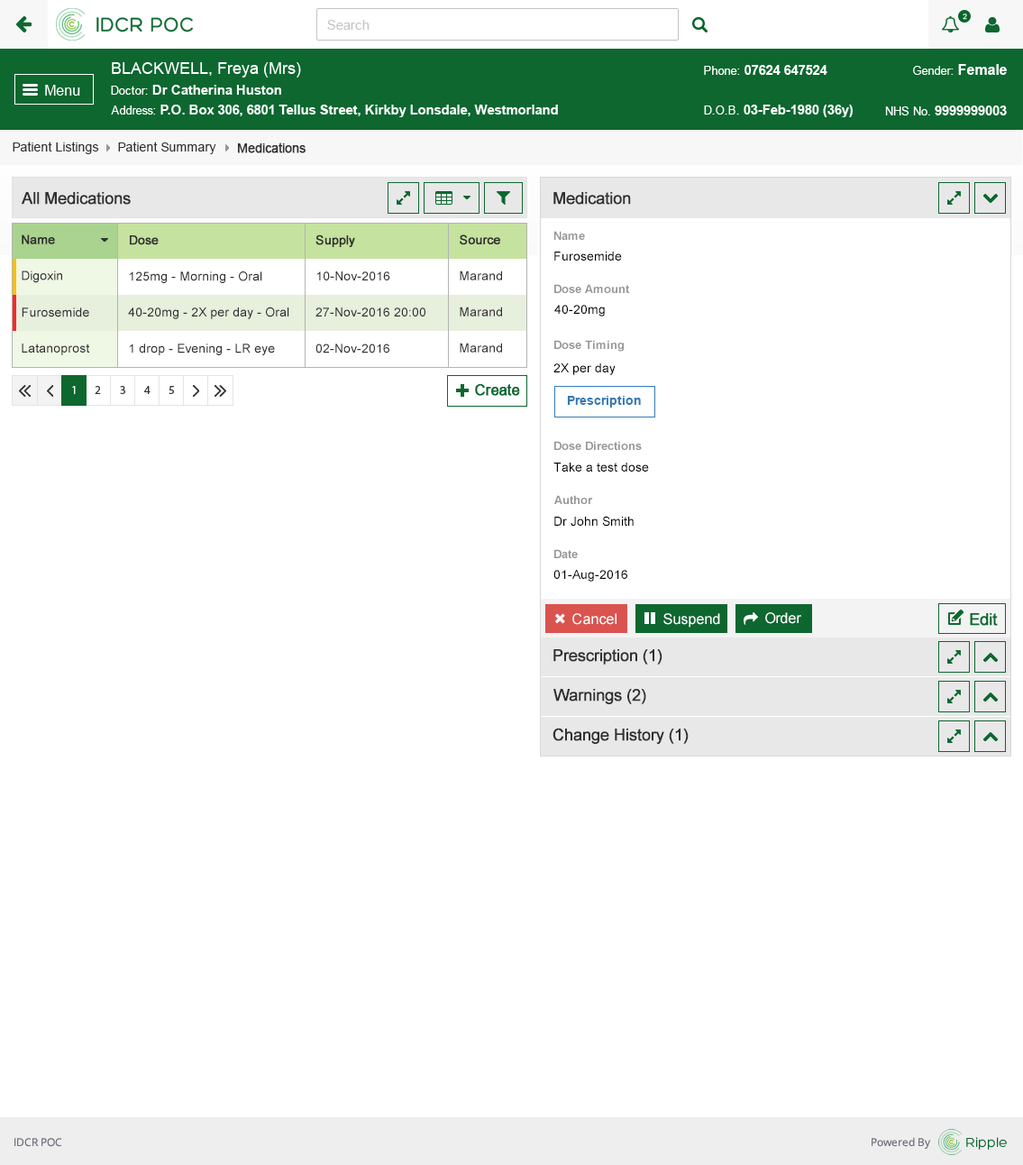
<style>
.page{position:relative;width:1023px;height:1165px;background:#ffffff}
.page>*{position:absolute;margin:0}
.t1{font:12.6px "ArialMT";color:#313131}
.t2{font:12.6px "ArialMT";color:#313131;font-weight:bold}
.t3{font:16.2px "ArialMT";color:#303030;font-weight:bold}
.t4{font:11.7px "Arial-BoldMT";color:#959595}
.t5{font:12.6px "ArialMT";color:#303030;font-weight:bold}
.t6{font:12.6px "ArialMT";color:#000000}
.t7{font:12.6px "ArialMT";color:#303030}
.t8{font:12.6px "Arial-BoldMT";color:#337ab7}
.t9{font:14.4px "ArialMT";color:#ffffff}
</style>
<div class="page">
<p class="t1" style="left:13px;top:142px;width:86px;height:12px">Patient Listings</p>
<p class="t1" style="left:118px;top:142px;width:98px;height:12px">Patient Summary</p>
<p class="t2" style="left:237px;top:142px;width:69px;height:11px">Medications</p>
<p class="t3" style="left:22px;top:192px;width:109px;height:13px">All Medications</p>
<p class="t3" style="left:554px;top:192px;width:77px;height:13px">Medication</p>
<p class="t4" style="left:555px;top:231px;width:30px;height:9px">Name</p>
<p class="t5" style="left:22px;top:234px;width:33px;height:10px">Name</p>
<p class="t5" style="left:130px;top:235px;width:29px;height:10px">Dose</p>
<p class="t5" style="left:316px;top:234px;width:39px;height:13px">Supply</p>
<p class="t5" style="left:460px;top:234px;width:40px;height:11px">Source</p>
<p class="t6" style="left:555px;top:252px;width:67px;height:9px">Furosemide</p>
<p class="t7" style="left:22px;top:271px;width:40px;height:12px">Digoxin</p>
<p class="t7" style="left:129px;top:271px;width:133px;height:12px">125mg - Morning - Oral</p>
<p class="t7" style="left:317px;top:271px;width:73px;height:9px">10-Nov-2016</p>
<p class="t7" style="left:460px;top:271px;width:42px;height:9px">Marand</p>
<p class="t4" style="left:555px;top:284px;width:75px;height:9px">Dose Amount</p>
<p class="t6" style="left:555px;top:305px;width:50px;height:12px">40-20mg</p>
<p class="t7" style="left:22px;top:307px;width:67px;height:10px">Furosemide</p>
<p class="t7" style="left:128px;top:307px;width:161px;height:12px">40-20mg - 2X per day - Oral</p>
<p class="t7" style="left:316px;top:307px;width:110px;height:10px">27-Nov-2016 20:00</p>
<p class="t7" style="left:460px;top:307px;width:42px;height:10px">Marand</p>
<p class="t4" style="left:555px;top:340px;width:69px;height:12px">Dose Timing</p>
<p class="t7" style="left:22px;top:344px;width:68px;height:11px">Latanoprost</p>
<p class="t7" style="left:129px;top:344px;width:146px;height:11px">1 drop - Evening - LR eye</p>
<p class="t7" style="left:316px;top:344px;width:74px;height:9px">02-Nov-2016</p>
<p class="t7" style="left:460px;top:343px;width:42px;height:10px">Marand</p>
<p class="t6" style="left:554px;top:363px;width:62px;height:12px">2X per day</p>
<p class="t8" style="left:567px;top:396px;width:74px;height:12px">Prescription</p>
<p class="t4" style="left:555px;top:441px;width:87px;height:9px">Dose Directions</p>
<p class="t6" style="left:554px;top:463px;width:95px;height:9px">Take a test dose</p>
<p class="t4" style="left:555px;top:495px;width:38px;height:9px">Author</p>
<p class="t6" style="left:555px;top:516px;width:79px;height:11px">Dr John Smith</p>
<p class="t4" style="left:555px;top:549px;width:23px;height:9px">Date</p>
<p class="t6" style="left:554px;top:570px;width:74px;height:12px">01-Aug-2016</p>
<p class="t9" style="left:573px;top:613px;width:44px;height:12px">Cancel</p>
<p class="t9" style="left:664px;top:613px;width:57px;height:15px">Suspend</p>
<p class="t9" style="left:766px;top:612px;width:36px;height:12px">Order</p>
<p class="t3" style="left:554px;top:649px;width:109px;height:16px">Prescription (1)</p>
<p class="t3" style="left:554px;top:689px;width:93px;height:15px">Warnings (2)</p>
<p class="t3" style="left:553px;top:728px;width:136px;height:16px">Change History (1)</p>
</div>
